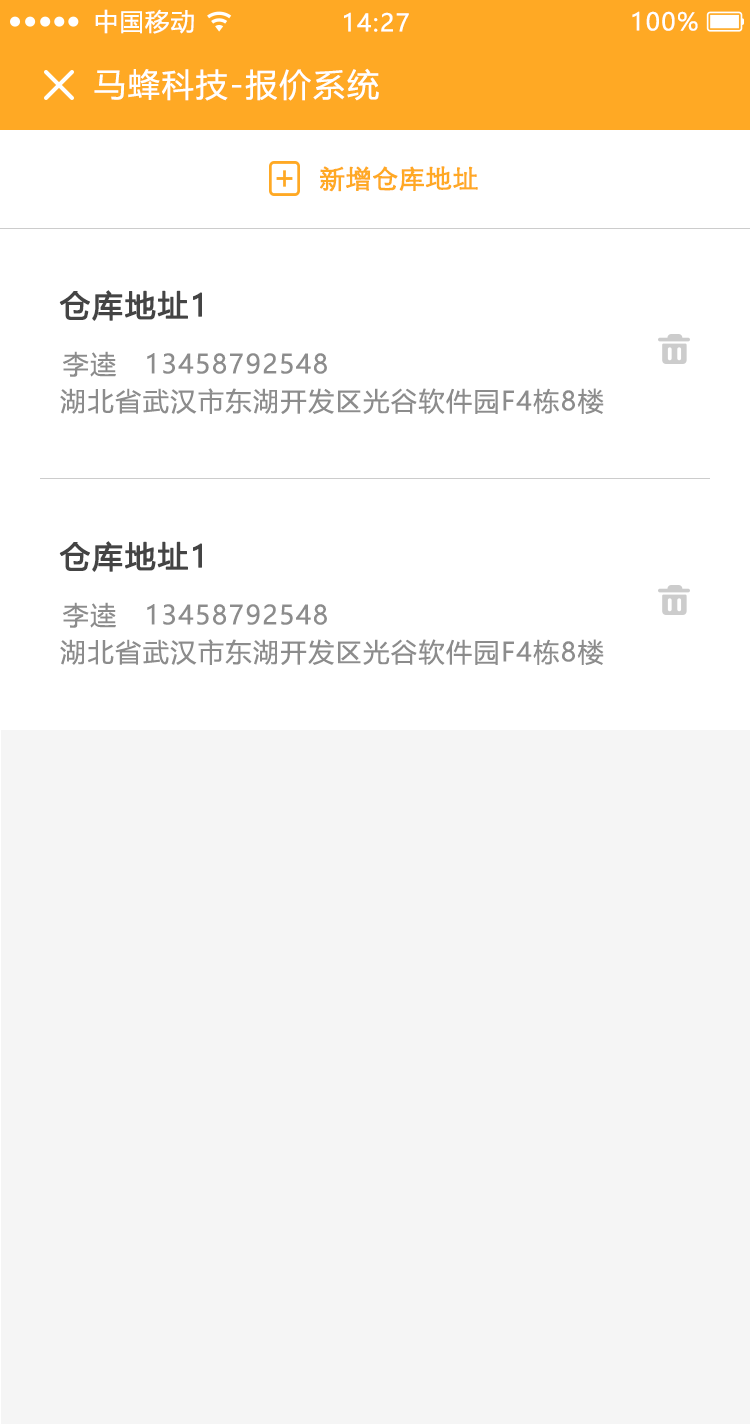
<style>
.page{position:relative;width:750px;height:1424px;background:#f5f5f5}
.page>*{position:absolute;margin:0}
.t1{font:24px "MicrosoftYaHeiUI";letter-spacing:0.06em;color:#ffffff}
.t2{font:32px "MicrosoftYaHeiUI";letter-spacing:0.06em;color:#ffffff}
.t3{font:26px "STXihei";color:#ffa924;font-weight:bold}
.t4{font:30px "MicrosoftYaHeiUI";letter-spacing:0.06em;color:#444444;font-weight:bold}
.t5{font:26px "MicrosoftYaHeiUI";letter-spacing:0.06em;color:#8c8c8c}
</style>
<div class="page">
<p class="t1" style="left:95px;top:9px;width:99px;height:25px">中国移动</p>
<p class="t1" style="left:344px;top:12px;width:65px;height:20px">14:27</p>
<p class="t1" style="left:632px;top:11px;width:66px;height:20px">100%</p>
<p class="t2" style="left:94px;top:68px;width:285px;height:33px">马蜂科技-报价系统</p>
<p class="t3" style="left:320px;top:166px;width:158px;height:26px">新增仓库地址</p>
<p class="t4" style="left:59px;top:290px;width:143px;height:31px">仓库地址1</p>
<p class="t5" style="left:63px;top:351px;width:53px;height:26px">李逵</p>
<p class="t5" style="left:147px;top:353px;width:180px;height:21px">13458792548</p>
<p class="t5" style="left:60px;top:388px;width:544px;height:26px">湖北省武汉市东湖开发区光谷软件园F4栋8楼</p>
<p class="t4" style="left:59px;top:541px;width:143px;height:31px">仓库地址1</p>
<p class="t5" style="left:63px;top:602px;width:53px;height:26px">李逵</p>
<p class="t5" style="left:147px;top:604px;width:180px;height:21px">13458792548</p>
<p class="t5" style="left:60px;top:639px;width:544px;height:26px">湖北省武汉市东湖开发区光谷软件园F4栋8楼</p>
</div>
